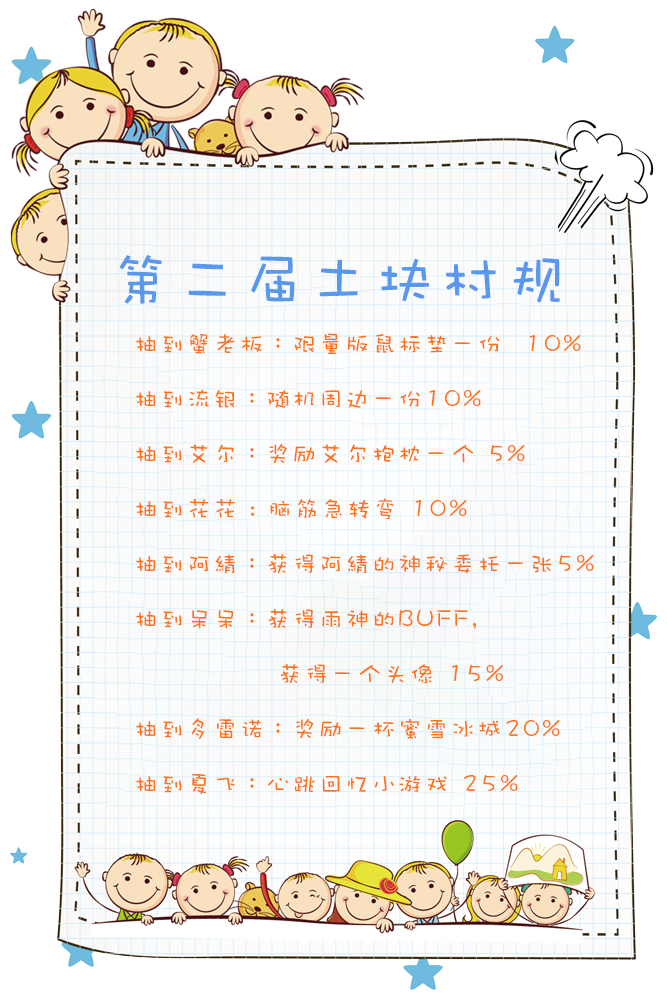
<style>
.page{position:relative;width:667px;height:1000px;background:#ffffff}
.page>*{position:absolute;margin:0}
.t1{font:60px "DFWaWaSC-W5";letter-spacing:0.1em;color:#5998ed;text-transform:uppercase}
.t2{font:24px/55px "DFWaWaSC-W5";letter-spacing:0.1em;color:#ff721a;text-transform:uppercase}
</style>
<div class="page">
<p class="t1" style="left:119px;top:255px;width:441px;height:49px">第二届土块村规</p>
<p class="t2" style="left:136px;top:333px;width:458px;height:462px">抽到蟹老板：限量版鼠标垫一份  10% <br>抽到流银：随机周边一份10% <br>抽到艾尔：奖励艾尔抱枕一个 5% <br>抽到花花 : 脑筋急转弯 10%<br>抽到阿綪：获得阿綪的神秘委托一张5% <br>抽到呆呆：获得雨神的BUFF，<br>    获得一个头像 15%<br>抽到多雷诺：奖励一杯蜜雪冰城20%  <br>抽到夏飞：心跳回忆小游戏 25%</p>
</div>
